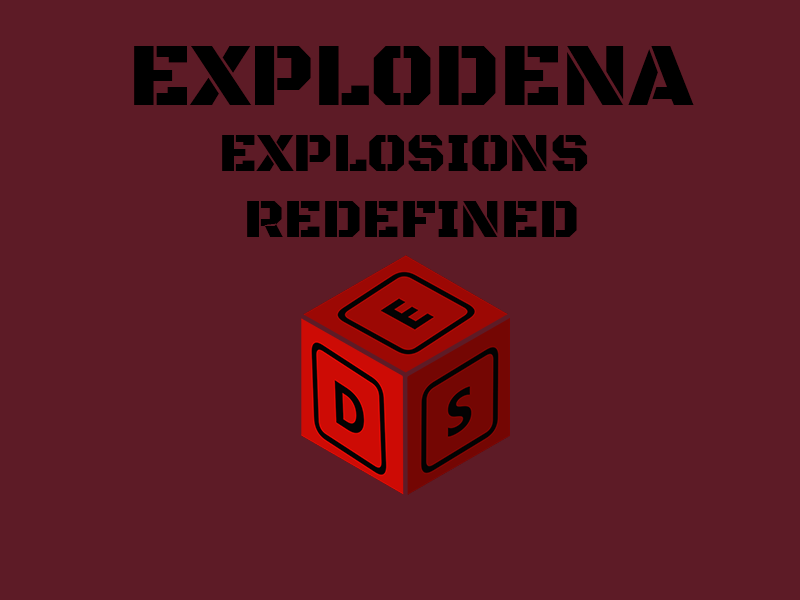
<style>
.page{position:relative;width:800px;height:600px;background:#5d1b26}
.page>*{position:absolute;margin:0}
.t1{font:55px "BlackOpsOne-Regular";color:#000000}
.t2{font:90px "BlackOpsOne-Regular";color:#000000}
</style>
<div class="page">
<p class="t1" style="left:134px;top:46px;width:560px;height:191px;text-align:center"><span class="t2">EXPLODENA<br></span>EXPLOSIONS <br>REDEFINED</p>
</div>
